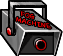
<style>
.page{position:relative;width:63px;height:56px;background:#ffffff}
.page>*{position:absolute;margin:0}
.t1{font:7.4px/6.9px "MuYaoSoftbrush";color:#ff0000;text-transform:uppercase;scale:1.26 1}
</style>
<div class="page">
<p class="t1" style="left:16px;top:11px;width:36px;height:18px;rotate:11deg">FOG<br>MACHINE</p>
</div>
